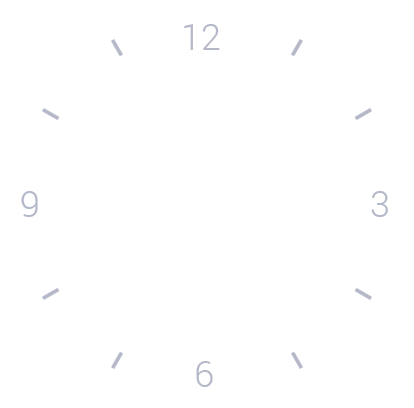
<style>
.page{position:relative;width:414px;height:408px;background:#ffffff}
.page>*{position:absolute;margin:0}
.t1{font:36px "Roboto-Light";color:#b4b8c8}
</style>
<div class="page">
<p class="t1" style="left:184px;top:24px;width:36px;height:26px">12</p>
<p class="t1" style="left:21px;top:191px;width:17px;height:26px">9</p>
<p class="t1" style="left:371px;top:191px;width:17px;height:26px">3</p>
<p class="t1" style="left:196px;top:361px;width:17px;height:26px">6</p>
</div>
